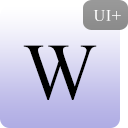
<style>
.page{position:relative;width:128px;height:128px}
.page>*{position:absolute;margin:0}
.t1{font:16.4px "TimesNewRomanPSMT";color:#ffffff;text-transform:uppercase}
.t2{font:80.1px "TimesNewRomanPSMT";color:#000000;text-transform:uppercase}
</style>
<div class="page">
<p class="t1" style="left:93px;top:10px;width:28px;height:11px">UI+</p>
<p class="t2" style="left:23px;top:45px;width:74px;height:55px">W</p>
</div>
